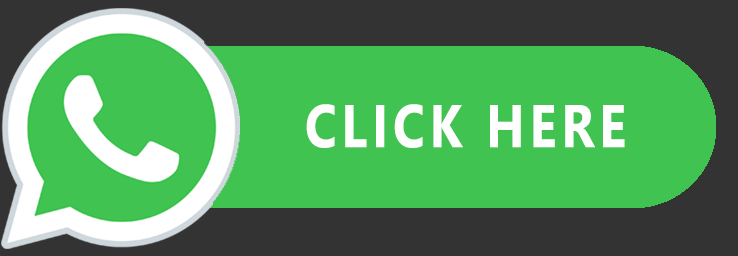
<style>
.page{position:relative;width:738px;height:256px;background:#40c351}
.page>*{position:absolute;margin:0}
.t1{font:60.1px "SegoeUI-Bold";letter-spacing:0.1em;color:#ffffff;scale:0.84 1}
</style>
<div class="page">
<p class="t1" style="left:306px;top:104px;width:319px;height:44px">CLICK HERE</p>
</div>
